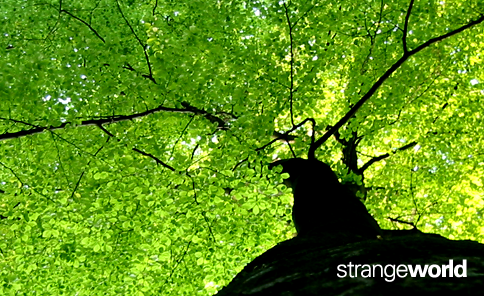
<style>
.page{position:relative;width:484px;height:296px}
.page>*{position:absolute;margin:0}
.t1{font:24px "Univers-Light";letter-spacing:-0.05em;color:#ffffff}
.t2{font:24px "Univers-Bold";letter-spacing:-0.05em;color:#ffffff}
</style>
<div class="page">
<p class="t1" style="left:337px;top:259px;width:130px;height:23px">strange<span class="t2">world</span></p>
</div>
